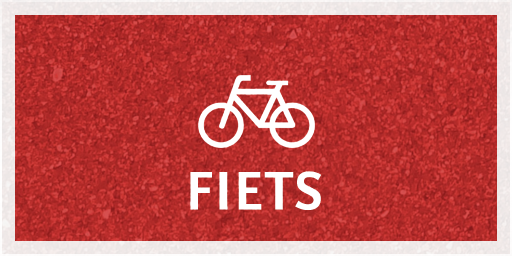
<style>
.page{position:relative;width:512px;height:256px}
.page>*{position:absolute;margin:0}
.t1{font:50px "AnwbUu-Regular";color:#ffffff}
</style>
<div class="page">
<p class="t1" style="left:190px;top:171px;width:131px;height:39px">FIETS</p>
</div>
